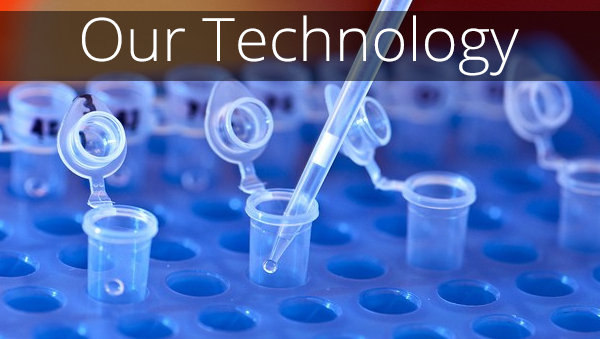
<style>
.page{position:relative;width:600px;height:339px}
.page>*{position:absolute;margin:0}
.t1{font:60px "OpenSans-Light";color:#ffffff;scale:1.03 1}
</style>
<div class="page">
<p class="t1" style="left:82px;top:15px;width:437px;height:61px">Our Technology</p>
</div>
